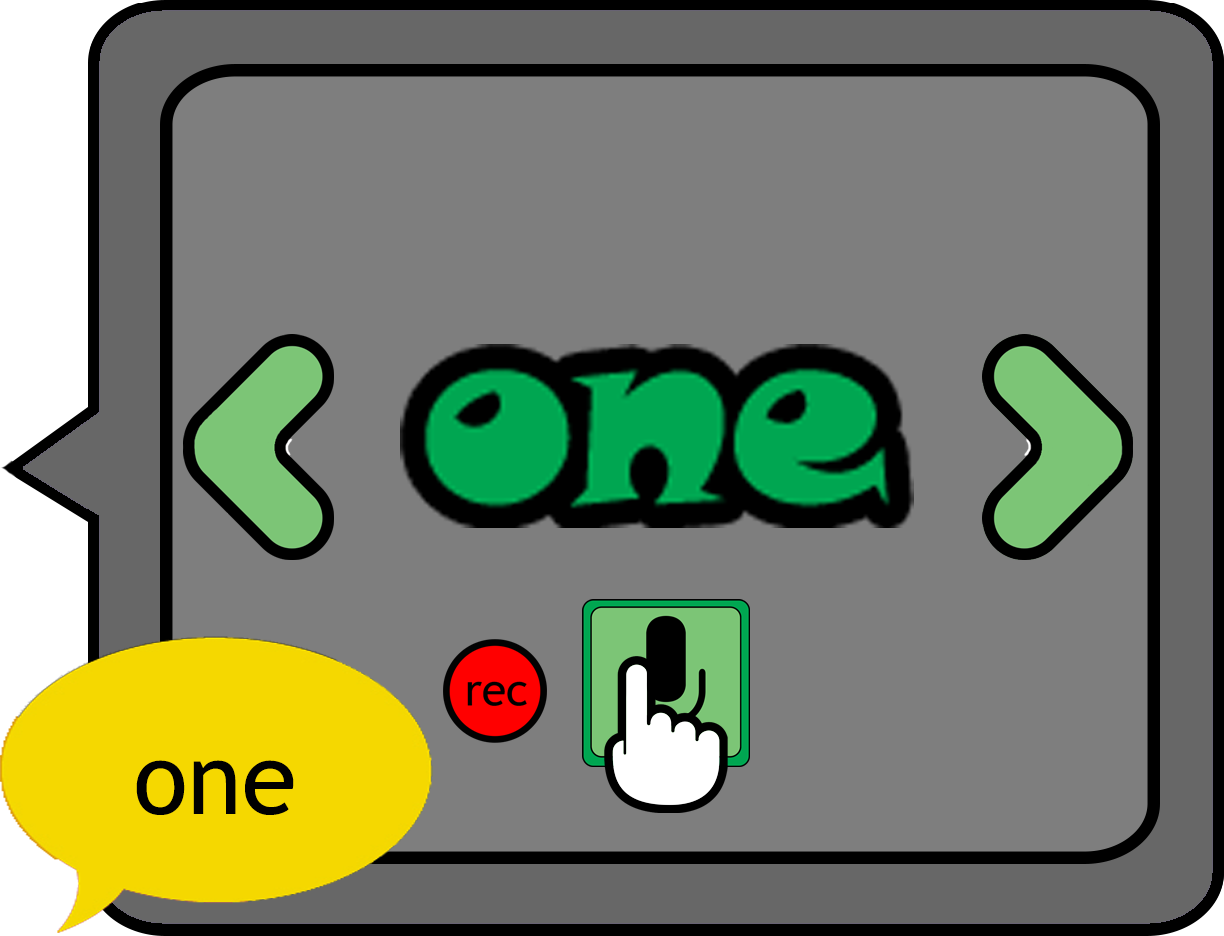
<style>
.page{position:relative;width:1224px;height:936px;background:#7e7e7e}
.page>*{position:absolute;margin:0}
.t1{font:100px "TrebuchetMS";color:#000000}
</style>
<div class="page">
<p class="t1" style="left:136px;top:760px;width:158px;height:55px">one</p>
</div>
